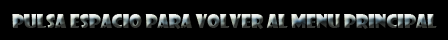
<style>
.page{position:relative;width:448px;height:40px;background:#000000}
.page>*{position:absolute;margin:0}
.t1{font:18px "ShowcardGothic-Reg"}
</style>
<div class="page">
<p class="t1" style="left:12px;top:14px;width:425px;height:15px">Pulsa espacio para volver al menu principal</p>
</div>
